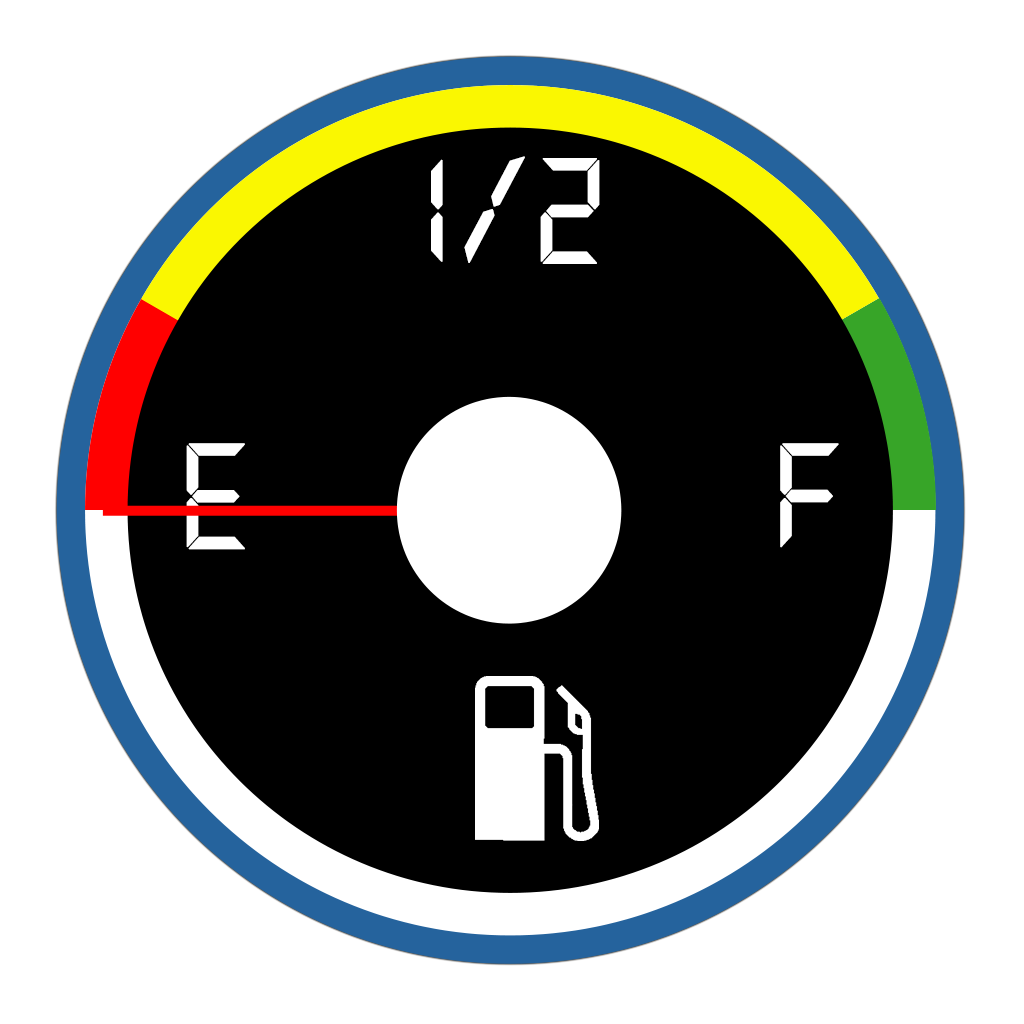
<style>
.page{position:relative;width:1024px;height:1024px;background:#ffffff}
.page>*{position:absolute;margin:0}
.t1{font:165px "DS-Digital";color:#ffffff;text-transform:uppercase;font-weight:bold;scale:0.91 1}
</style>
<div class="page">
<p class="t1" style="left:431px;top:156px;width:169px;height:108px">1/2</p>
<p class="t1" style="left:186px;top:443px;width:59px;height:107px">E</p>
<p class="t1" style="left:780px;top:443px;width:59px;height:105px">F</p>
</div>
